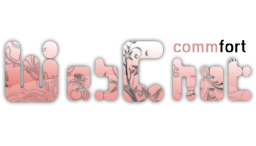
<style>
.page{position:relative;width:256px;height:146px;background:#ffffff}
.page>*{position:absolute;margin:0}
.t1{font:48.4px "SeedsCyr-Medium";letter-spacing:0.1em;font-weight:bold;scale:0.86 1}
.t2{font:87.1px "SeedsCyr-Medium";letter-spacing:0.1em;font-weight:bold;scale:0.86 1}
.t3{font:16.9px "MS Sans Serif";letter-spacing:0.1em;color:#d79894;font-weight:bold;scale:0.86 1}
.t4{font:16.9px "MS Sans Serif";letter-spacing:0.1em;color:#000000;font-weight:bold;scale:0.86 1}
</style>
<div class="page">
<p class="t1" style="left:5px;top:41px;width:246px;height:61px"><span class="t2">W</span>eb<span class="t2">C</span>hat</p>
<p class="t3" style="left:173px;top:39px;width:73px;height:14px">comm<span class="t4">fort</span></p>
</div>
